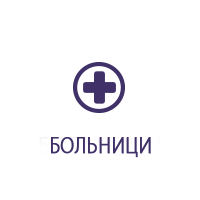
<style>
.page{position:relative;width:200px;height:200px;background:#ffffff}
.page>*{position:absolute;margin:0}
.t1{font:23.9px "MyriadPro-Light";letter-spacing:0.025em;color:#403168;font-variant:small-caps;font-weight:bold;scale:0.83 1}
</style>
<div class="page">
<p class="t1" style="left:51px;top:137px;width:100px;height:21px">БОЛЬНИЦИ</p>
</div>
